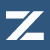
<style>
.page{position:relative;width:50px;height:50px;background:#2f577d}
.page>*{position:absolute;margin:0}
.t1{font:57.2px "TechnoHideo";color:#fbfcfd;scale:0.96 1}
</style>
<div class="page">
<p class="t1" style="left:6px;top:11px;width:38px;height:29px">Z</p>
</div>
